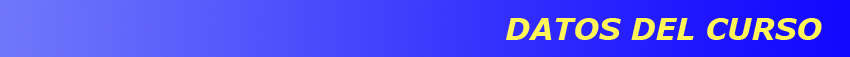
<style>
.page{position:relative;width:850px;height:57px}
.page>*{position:absolute;margin:0}
.t1{font:30px "Verdana-BoldItalic";color:#fff557}
</style>
<div class="page">
<p class="t1" style="left:506px;top:18px;width:316px;height:22px">DATOS DEL CURSO</p>
</div>
